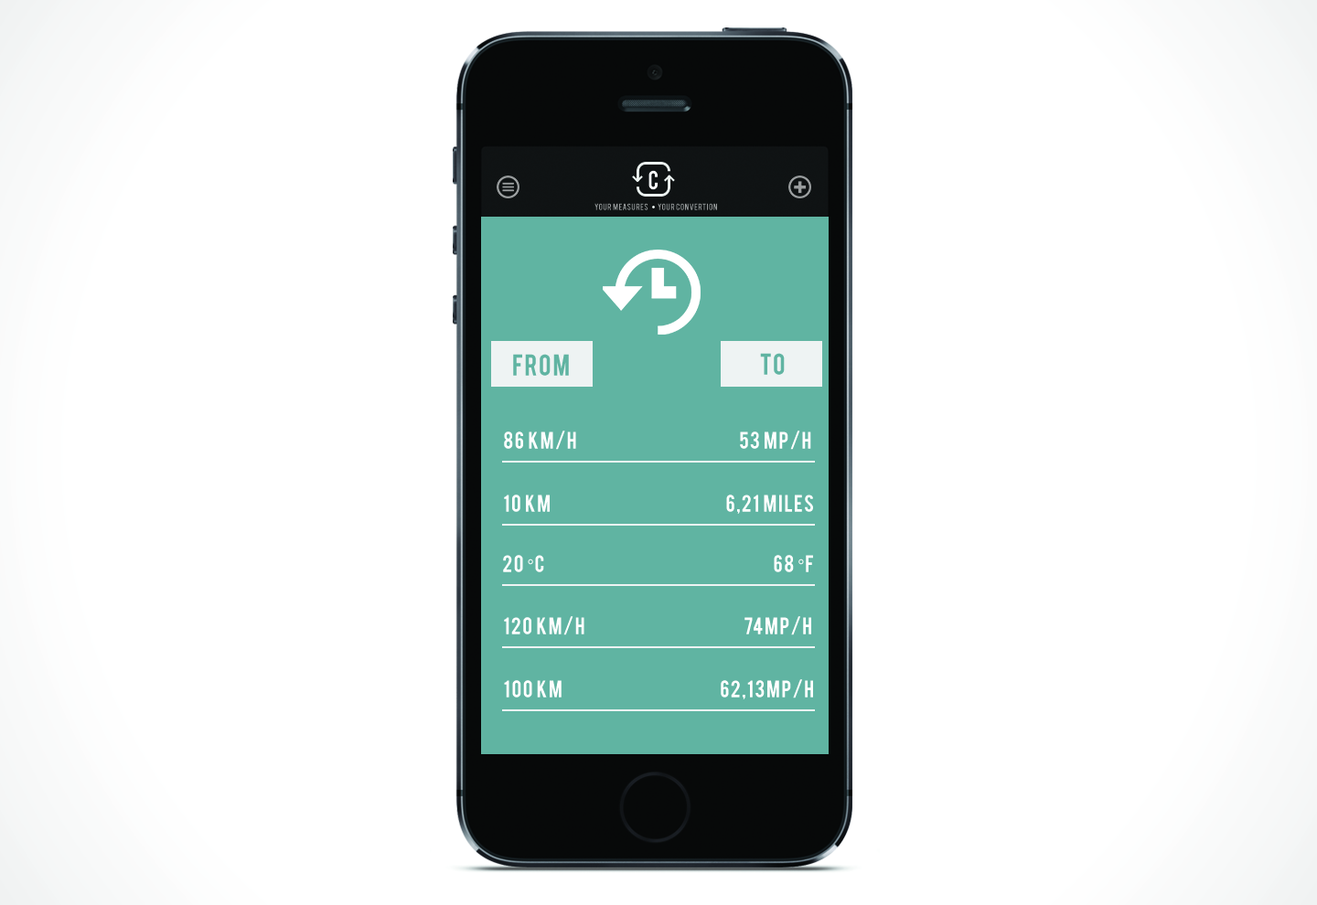
<style>
.page{position:relative;width:1317px;height:905px;background:#ffffff}
.page>*{position:absolute;margin:0}
.t1{font:20.6px "Bebas";letter-spacing:0.06em;color:#ffffff}
.t2{font:7.2px "Bebas";letter-spacing:0.06em;color:#9a9d9e}
.t3{font:23.2px "Bebas";letter-spacing:0.06em;color:#60b4a2}
.t4{font:18.6px "Bebas";letter-spacing:0.06em;color:#ffffff}
.t5{font:18.6px "MyriadPro-Regular";letter-spacing:0.06em;color:#ffffff}
</style>
<div class="page">
<p class="t1" style="left:648px;top:170px;width:10px;height:20px">C</p>
<p class="t2" style="left:594px;top:203px;width:123px;height:7px">your measures        your convertion</p>
<p class="t3" style="left:513px;top:354px;width:56px;height:22px">from</p>
<p class="t3" style="left:760px;top:353px;width:25px;height:22px">to</p>
<p class="t4" style="left:504px;top:431px;width:72px;height:19px">86 km/h</p>
<p class="t4" style="left:740px;top:431px;width:71px;height:19px">53 mp/h</p>
<p class="t4" style="left:504px;top:495px;width:46px;height:17px">10 km</p>
<p class="t4" style="left:726px;top:495px;width:87px;height:19px">6,21 miles</p>
<p class="t4" style="left:503px;top:555px;width:41px;height:18px">20 <span class="t5">°</span>C</p>
<p class="t4" style="left:774px;top:555px;width:39px;height:18px">68 <span class="t5">°</span>F</p>
<p class="t4" style="left:504px;top:616px;width:80px;height:20px">120 km/h</p>
<p class="t4" style="left:744px;top:616px;width:67px;height:20px">74mp/h</p>
<p class="t4" style="left:504px;top:680px;width:58px;height:18px">100 km</p>
<p class="t4" style="left:721px;top:680px;width:92px;height:20px">62,13mp/h</p>
</div>
